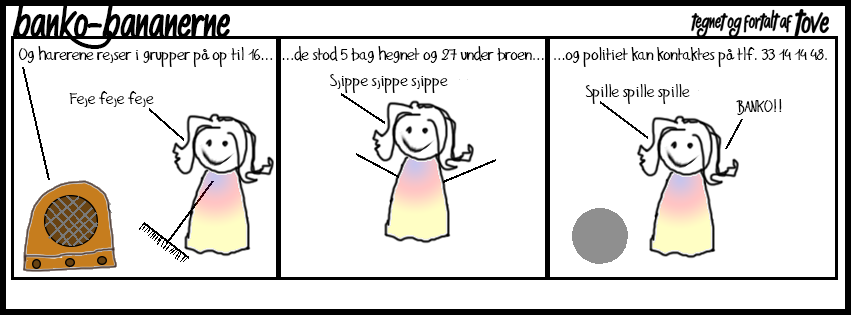
<style>
.page{position:relative;width:851px;height:315px;background:#ffffff}
.page>*{position:absolute;margin:0}
.t1{font:16px "Gilles'ComicFont";color:#000000}
.t2{font:16px "Gilles'ComicFont";color:#080808}
</style>
<div class="page">
<p class="t1" style="left:18px;top:46px;width:809px;height:21px">Og harerene rejser i grupper på op til 16...  ...de stod 5 bag hegnet og 27 under broen...  ...og politiet kan kontaktes på tlf. 33 14 14 48.</p>
<p class="t1" style="left:330px;top:74px;width:138px;height:19px">Sjippe sjippe sjippe</p>
<p class="t2" style="left:585px;top:84px;width:114px;height:20px">Spille spille spille</p>
<p class="t1" style="left:69px;top:91px;width:85px;height:16px">Feje feje feje</p>
<p class="t2" style="left:736px;top:99px;width:46px;height:16px">BANKO!!</p>
</div>
